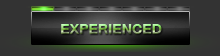
<style>
.page{position:relative;width:220px;height:56px;background:#333333}
.page>*{position:absolute;margin:0}
.t1{font:18px "Tunga-Bold"}
</style>
<div class="page">
<p class="t1" style="left:61px;top:24px;width:101px;height:10px">EXPERIENCED</p>
</div>
